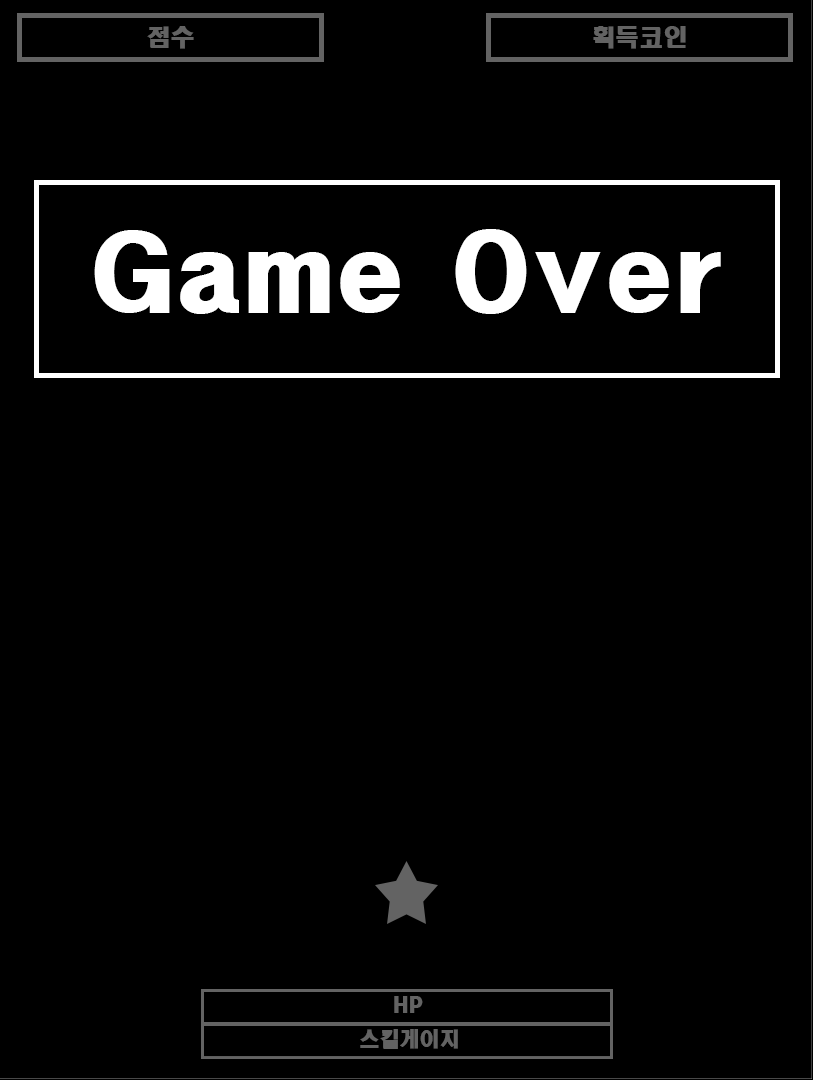
<style>
.page{position:relative;width:813px;height:1080px;background:#000000}
.page>*{position:absolute;margin:0}
.t1{font:24px "HeadlineR-HM";color:#636363}
.t2{font:94.7px "HeadlineR-HM";color:#ffffff}
.t3{font:20px "HeadlineR-HM";color:#636363}
</style>
<div class="page">
<p class="t1" style="left:147px;top:26px;width:47px;height:23px">점수</p>
<p class="t1" style="left:593px;top:26px;width:93px;height:23px">획득코인</p>
<p class="t2" style="left:94px;top:229px;width:627px;height:85px">Game Over</p>
<p class="t3" style="left:394px;top:996px;width:29px;height:17px">HP</p>
<p class="t3" style="left:360px;top:1029px;width:98px;height:20px">스킬게이지</p>
</div>
